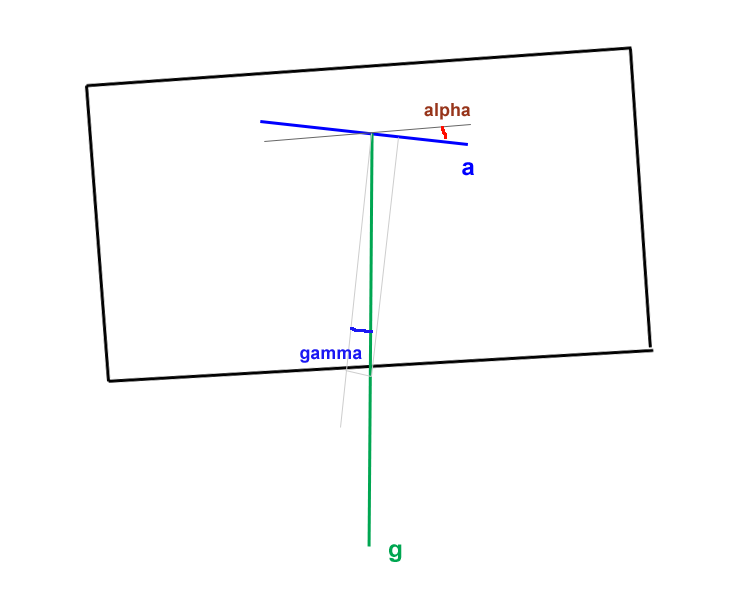
<style>
.page{position:relative;width:742px;height:590px;background:#ffffff}
.page>*{position:absolute;margin:0}
.t1{font:18px "Arial-BoldMT";color:#97351b}
.t2{font:24px "Arial-BoldMT";color:#0000ff}
.t3{font:18px "Arial-BoldMT";color:#1b18f3}
.t4{font:24px "Arial-BoldMT";color:#00a651}
</style>
<div class="page">
<p class="t1" style="left:424px;top:103px;width:47px;height:17px">alpha</p>
<p class="t2" style="left:462px;top:162px;width:12px;height:14px">a</p>
<p class="t3" style="left:300px;top:349px;width:62px;height:14px">gamma</p>
<p class="t4" style="left:389px;top:544px;width:13px;height:18px">g</p>
</div>
